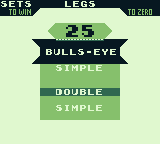
<style>
.page{position:relative;width:160px;height:144px;background:#e0f8cf}
.page>*{position:absolute;margin:0}
.t1{font:8px "Early-GameBoy";color:#e0f8cf}
.t2{font:16px "Early-GameBoy";color:#071821}
.t3{font:8px/8px "Early-GameBoy";color:#e0f8cf}
</style>
<div class="page">
<p class="t1" style="left:1px;top:1px;width:30px;height:6px">sets</p>
<p class="t1" style="left:65px;top:1px;width:30px;height:6px">Legs</p>
<p class="t2" style="left:66px;top:25px;width:28px;height:12px">25</p>
<p class="t3" style="left:46px;top:49px;width:70px;height:62px;text-align:center">Bulls-eye<br><br>simple<br><br><br>double<br>   <br>simple</p>
</div>
